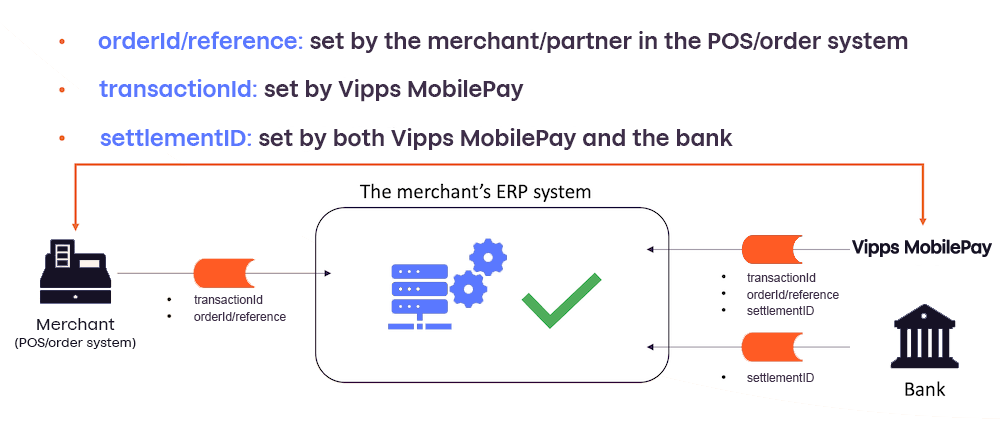
<style>
.page{position:relative;width:1000px;height:436px;background:#ffffff}
.page>*{position:absolute;margin:0}
.t1{font:22px "VippsMobilePayDisplay-Regular";color:#3e2e49}
.t2{font:22px "VippsMobilePayDisplay-Regular";color:#5a78ff}
.t3{font:12px "ArialMT";color:#3e2e49}
.t4{font:14px "VippsText-Regular";color:#161225}
.t5{font:18px "VippsText-Regular";color:#161225}
</style>
<div class="page">
<p class="t1" style="left:98px;top:31px;width:810px;height:22px"><span class="t2">orderId/reference: </span>set by the merchant/partner in the POS/order system</p>
<p class="t1" style="left:99px;top:79px;width:425px;height:23px"><span class="t2">transactionId:</span> set by Vipps MobilePay</p>
<p class="t1" style="left:100px;top:128px;width:633px;height:22px"><span class="t2">settlementID: </span>set by both Vipps MobilePay and the bank</p>
<p class="t3" style="left:747px;top:273px;width:69px;height:9px">transactionId</p>
<p class="t3" style="left:747px;top:290px;width:92px;height:9px">orderId/reference</p>
<p class="t3" style="left:194px;top:295px;width:69px;height:9px">transactionId</p>
<p class="t4" style="left:15px;top:318px;width:121px;height:31px;text-align:center"><span class="t5">Merchant<br></span>(POS/order system)</p>
<p class="t3" style="left:194px;top:312px;width:92px;height:9px">orderId/reference</p>
<p class="t3" style="left:747px;top:306px;width:67px;height:9px">settlementID</p>
<p class="t3" style="left:747px;top:373px;width:67px;height:9px">settlementID</p>
</div>
